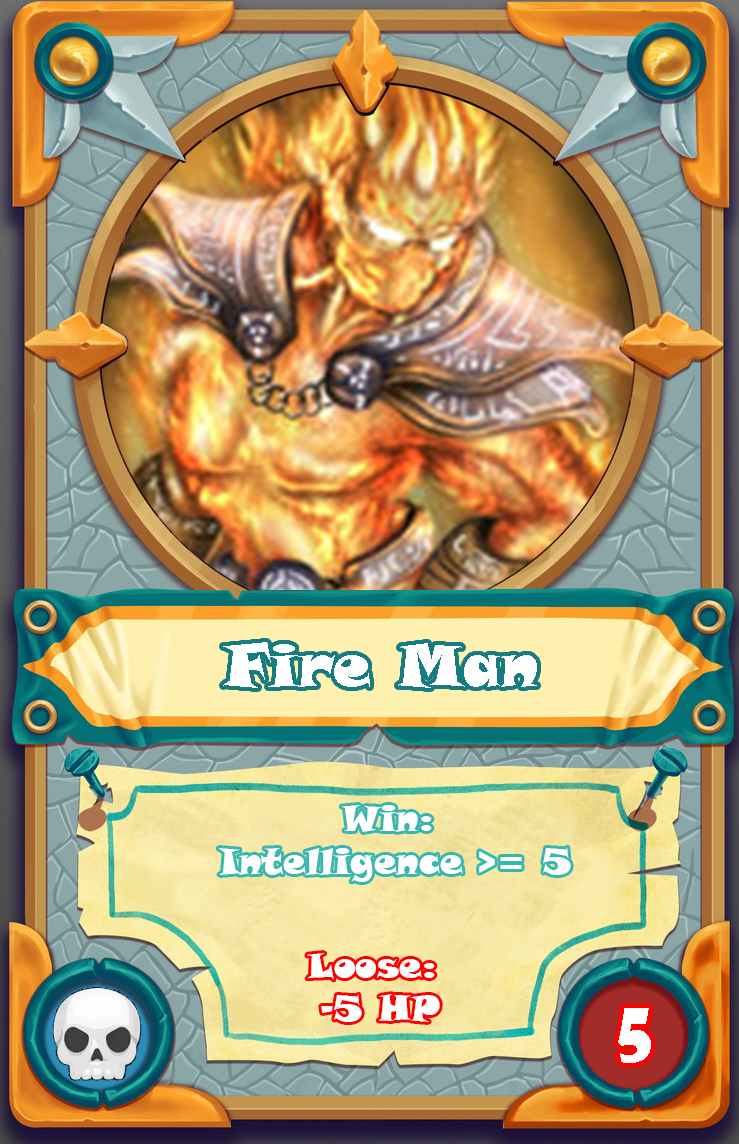
<style>
.page{position:relative;width:739px;height:1144px}
.page>*{position:absolute;margin:0}
.t1{font:60px "SnapITC-Regular";color:#ffffff}
.t2{font:36px "SnapITC-Regular";color:#ffffff}
.t3{font:72px "ShowcardGothic-Reg";color:#ffffff}
</style>
<div class="page">
<p class="t1" style="left:223px;top:642px;width:314px;height:46px">Fire Man</p>
<p class="t2" style="left:218px;top:805px;width:353px;height:77px;text-align:center">Win: <br>Intelligence &gt;= 5</p>
<p class="t2" style="left:307px;top:953px;width:133px;height:69px;text-align:center">Loose: <br>-5 HP</p>
<p class="t3" style="left:618px;top:1008px;width:33px;height:55px">5</p>
</div>
